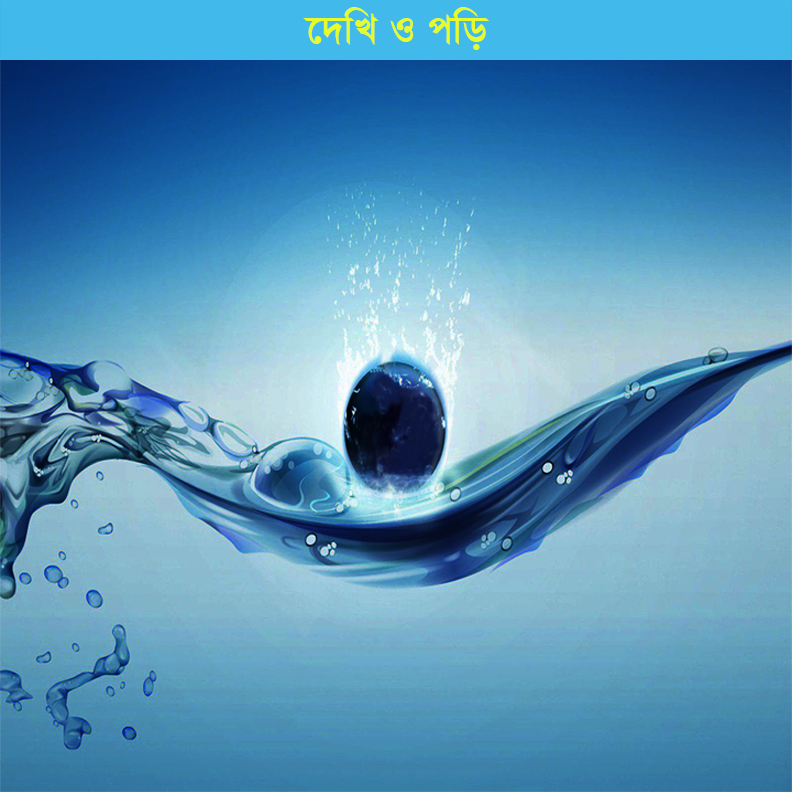
<style>
.page{position:relative;width:792px;height:792px}
.page>*{position:absolute;margin:0}
.t1{font:46px "SutonnyMJBold";color:#e5fb2b}
</style>
<div class="page">
<p class="t1" style="left:303px;top:7px;width:186px;height:43px">‡`wL I cwo</p>
</div>
